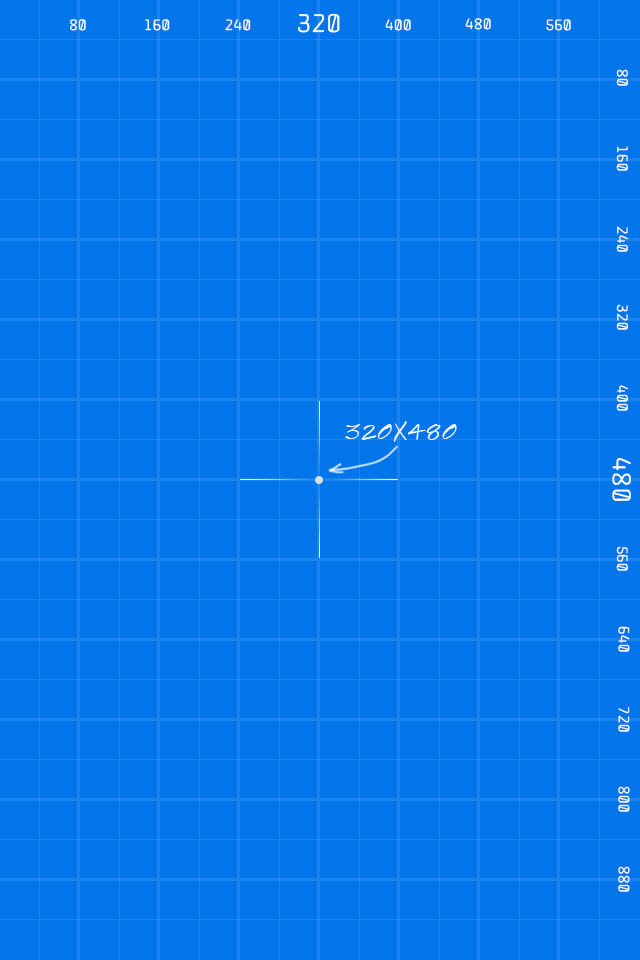
<style>
.page{position:relative;width:640px;height:960px;background:#0275ea}
.page>*{position:absolute;margin:0}
.t1{font:24px "Offside-Regular";letter-spacing:0.03em;color:#ffffff;text-transform:uppercase}
.t2{font:14px "Offside-Regular";letter-spacing:0.03em;color:#ffffff;text-transform:uppercase}
.t3{font:23.8px "SketchFlowPrint";letter-spacing:0.03em;color:#edfafe;text-transform:uppercase}
</style>
<div class="page">
<p class="t1" style="left:298px;top:13px;width:42px;height:20px">320</p>
<p class="t2" style="left:70px;top:19px;width:16px;height:12px">80</p>
<p class="t2" style="left:145px;top:19px;width:25px;height:12px">160</p>
<p class="t2" style="left:225px;top:19px;width:26px;height:12px">240</p>
<p class="t2" style="left:385px;top:19px;width:26px;height:12px">400</p>
<p class="t2" style="left:465px;top:18px;width:26px;height:12px">480</p>
<p class="t2" style="left:546px;top:19px;width:25px;height:12px">560</p>
<p class="t2" style="left:616px;top:69px;width:12px;height:17px;rotate:90deg">80</p>
<p class="t2" style="left:616px;top:146px;width:12px;height:25px;rotate:90deg">160</p>
<p class="t2" style="left:616px;top:226px;width:12px;height:26px;rotate:90deg">240</p>
<p class="t2" style="left:616px;top:304px;width:12px;height:26px;rotate:90deg">320</p>
<p class="t2" style="left:616px;top:385px;width:12px;height:26px;rotate:90deg">400</p>
<p class="t3" style="left:345px;top:421px;width:112px;height:21px">320x480</p>
<p class="t1" style="left:612px;top:457px;width:19px;height:44px;rotate:90deg">480</p>
<p class="t2" style="left:616px;top:546px;width:12px;height:25px;rotate:90deg">560</p>
<p class="t2" style="left:618px;top:626px;width:12px;height:26px;rotate:90deg">640</p>
<p class="t2" style="left:618px;top:707px;width:12px;height:25px;rotate:90deg">720</p>
<p class="t2" style="left:618px;top:786px;width:12px;height:26px;rotate:90deg">800</p>
<p class="t2" style="left:618px;top:866px;width:12px;height:26px;rotate:90deg">880</p>
</div>
